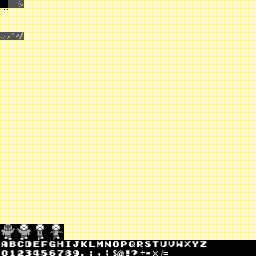
<style>
.page{position:relative;width:256px;height:256px;background:#fffad0}
.page>*{position:absolute;margin:0}
.t1{font:7.6px "Early-GameBoy";letter-spacing:0.05em;color:#ffffff}
.t2{font:7.6px "TimesNewRomanPSMT";letter-spacing:0.05em;color:#ffffff}
</style>
<div class="page">
<p class="t1" style="left:1px;top:241px;width:206px;height:17px">abcdefghijklmnopqrstuvwxyz<br>0123456789.:,;<span class="t2">$@</span>!?<span class="t2">+</span>-*<span class="t2">/=</span></p>
</div>
